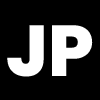
<style>
.page{position:relative;width:100px;height:100px;background:#000000}
.page>*{position:absolute;margin:0}
.t1{font:72px "Poppins-ExtraBold";color:#ffffff}
</style>
<div class="page">
<p class="t1" style="left:7px;top:25px;width:86px;height:52px">JP</p>
</div>
